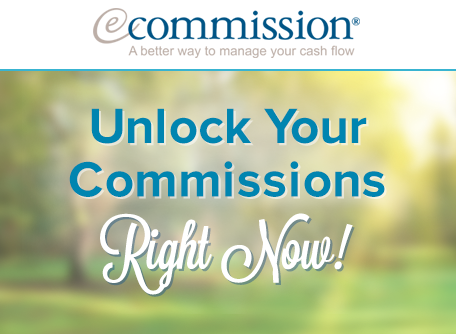
<style>
.page{position:relative;width:456px;height:334px}
.page>*{position:absolute;margin:0}
.t1{font:51.4px/53.4px "ProximaNova-Bold";color:#0085b0}
.t2{font:51.4px/53.4px "ProximaNova-Bold"}
.t3{font:61.5px "Lavanderia-Sturdy";color:#ffffff}
.t4{font:61.5px "Lavanderia-Sturdy"}
</style>
<div class="page">
<p class="t1" style="left:69px;top:108px;width:316px;height:89px;text-align:center">Unlock Your<br>Commissions</p>
<p class="t2" style="left:71px;top:111px;width:316px;height:88px;text-align:center">Unlock Your<br>Commissions</p>
<p class="t3" style="left:100px;top:213px;width:253px;height:82px">Right Now!</p>
<p class="t4" style="left:102px;top:215px;width:253px;height:82px">Right Now!</p>
</div>
